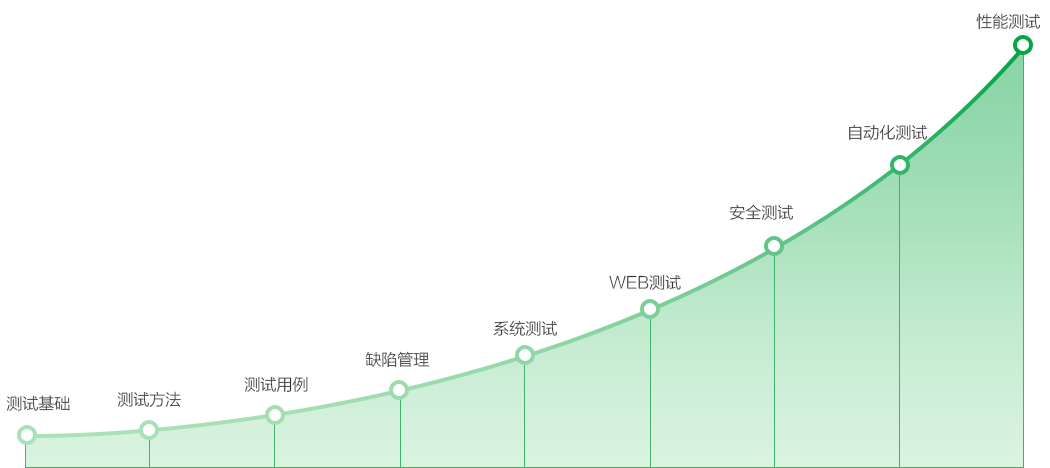
<style>
.page{position:relative;width:1050px;height:468px;background:#ffffff}
.page>*{position:absolute;margin:0}
.t1{font:16px "FZLTXHK--GBK1-0";color:#352e35}
.t2{font:64px "FZLTTHK--GBK1-0";color:#fff497}
.t3{font:16px "FZLTXHK--GBK1-0"}
.t4{font:64px "FZLTTHK--GBK1-0"}
</style>
<div class="page">
<p class="t1" style="left:976px;top:13px;width:64px;height:17px"><span class="t2"> </span>性能测试</p>
<p class="t1" style="left:849px;top:124px;width:78px;height:16px"><span class="t2"> </span>自动化测试</p>
<p class="t1" style="left:729px;top:204px;width:64px;height:16px"><span class="t2"> </span>安全测试</p>
<p class="t1" style="left:609px;top:274px;width:72px;height:16px"><span class="t2"> </span>WEB测试</p>
<p class="t1" style="left:493px;top:320px;width:64px;height:17px"><span class="t2"> </span>系统测试</p>
<p class="t3" style="left:365px;top:351px;width:65px;height:17px"><span class="t4"> </span>缺陷管理</p>
<p class="t1" style="left:244px;top:376px;width:64px;height:16px"><span class="t2"> </span>测试用例</p>
<p class="t1" style="left:6px;top:395px;width:64px;height:16px"><span class="t2"> </span>测试基础</p>
<p class="t1" style="left:117px;top:391px;width:64px;height:16px"><span class="t2"> </span>测试方法</p>
</div>
